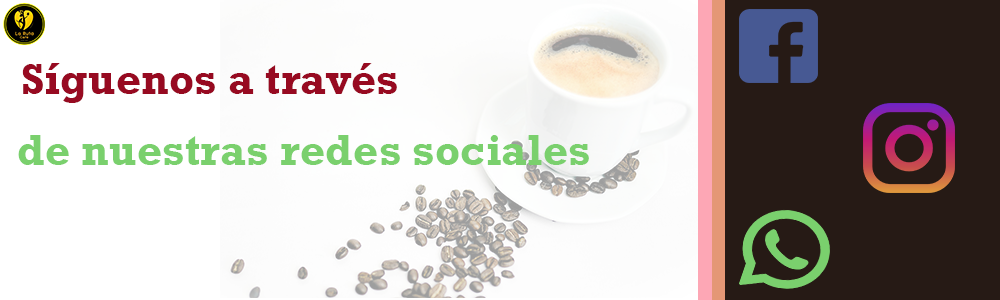
<style>
.page{position:relative;width:1000px;height:300px;background:#261a15}
.page>*{position:absolute;margin:0}
.t1{font:44.4px "Rockwell-Bold";color:#970a21}
.t2{font:44.4px "Rockwell-Bold";color:#7ad06d}
</style>
<div class="page">
<p class="t1" style="left:22px;top:63px;width:375px;height:40px">Síguenos a través</p>
<p class="t2" style="left:18px;top:135px;width:571px;height:30px">de nuestras redes sociales</p>
</div>
